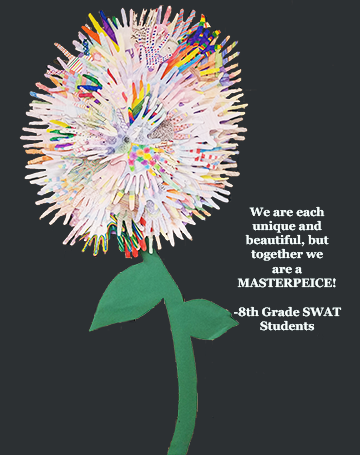
<style>
.page{position:relative;width:360px;height:455px;background:#2c3033}
.page>*{position:absolute;margin:0}
.t1{font:11.9px "Georgia-Bold";color:#e8f4f3}
</style>
<div class="page">
<p class="t1" style="left:234px;top:206px;width:108px;height:125px;text-align:center">We are each <br>unique and <br>beautiful, but <br>together we <br>are a <br>MASTERPEICE! <br><br>-8th Grade SWAT Students</p>
</div>
